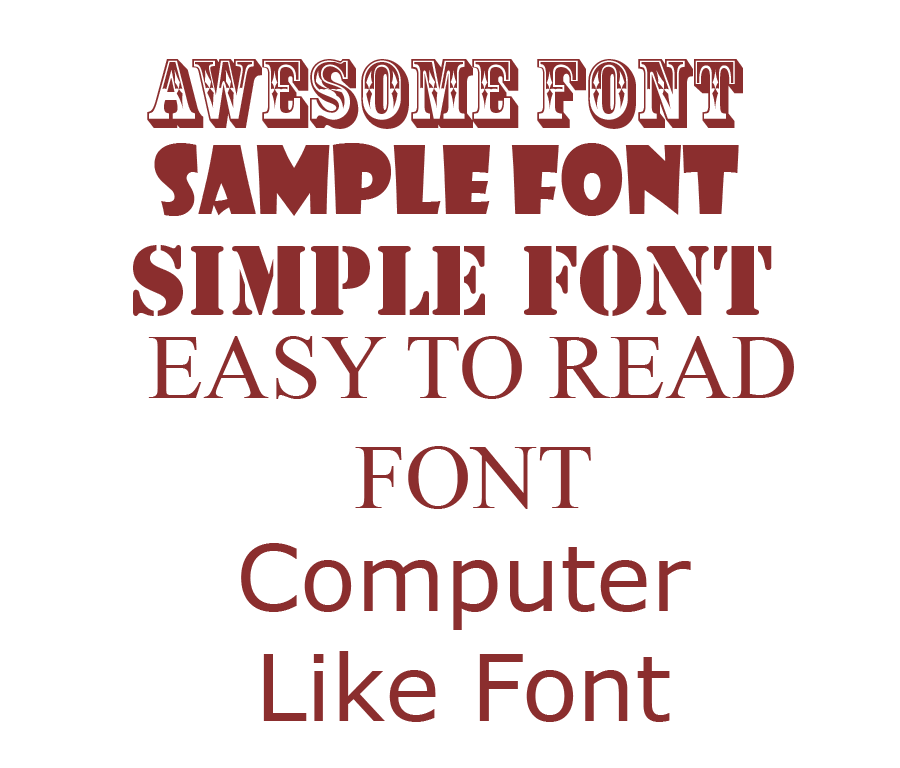
<style>
.page{position:relative;width:900px;height:768px;background:#ffffff}
.page>*{position:absolute;margin:0}
.t1{font:91.7px "RosewoodStd-Regular";color:#8b2e2e}
.t2{font:91.7px "ShowcardGothic-Reg";color:#8b2e2e}
.t3{font:91.7px "StencilStd";color:#8b2e2e}
.t4{font:91.7px "TimesNewRomanPSMT";color:#8b2e2e}
.t5{font:91.7px "Verdana";color:#8b2e2e}
</style>
<div class="page">
<p class="t1" style="left:147px;top:59px;width:596px;height:70px">AWESOME FONT</p>
<p class="t2" style="left:154px;top:143px;width:585px;height:73px">SAMPLE FONT</p>
<p class="t3" style="left:133px;top:245px;width:639px;height:71px">SIMPLE FONT</p>
<p class="t4" style="left:148px;top:336px;width:646px;height:173px;text-align:center">EASY TO READ FONT</p>
<p class="t5" style="left:241px;top:543px;width:450px;height:179px;text-align:center">Computer Like Font</p>
</div>
